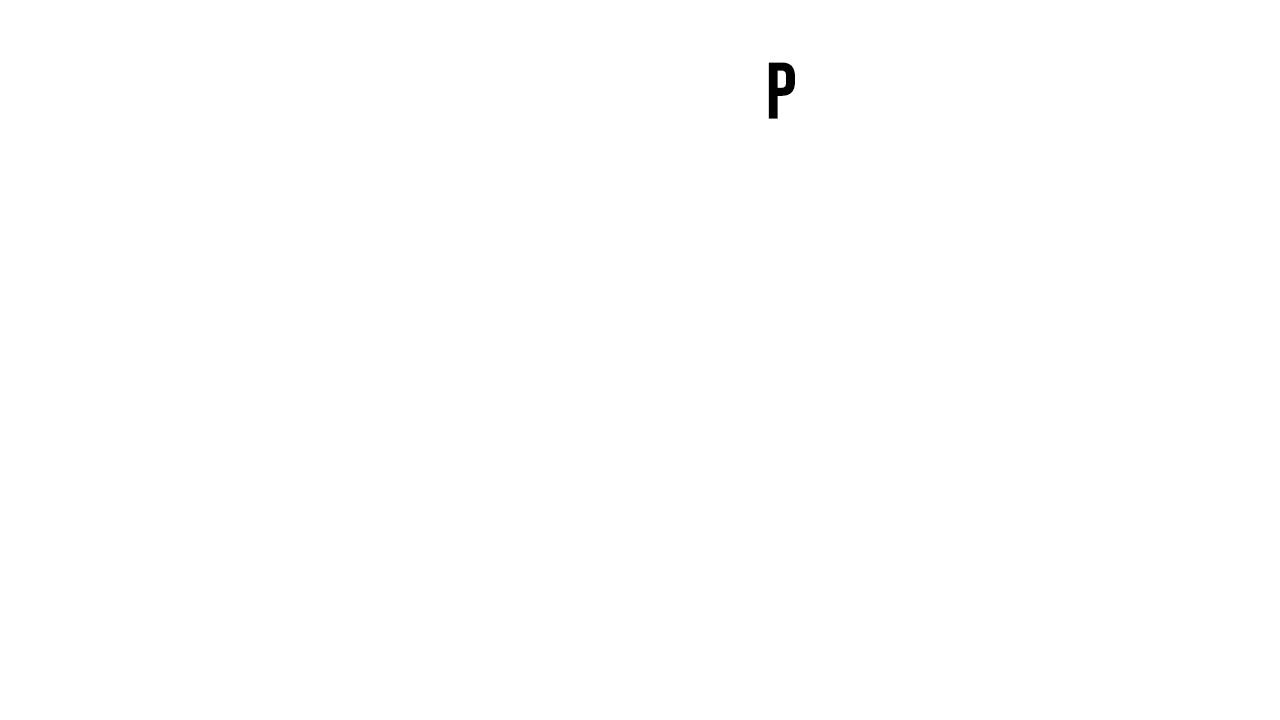
<style>
.page{position:relative;width:1280px;height:720px;background:#ffffff}
.page>*{position:absolute;margin:0}
.t1{font:80px "BebasNeue-Regular";letter-spacing:0.08em;color:#000000}
</style>
<div class="page">
<p class="t1" style="left:768px;top:62px;width:27px;height:57px">P</p>
</div>
